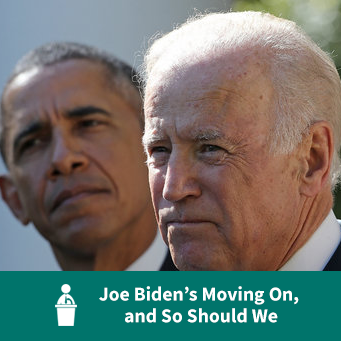
<style>
.page{position:relative;width:341px;height:341px}
.page>*{position:absolute;margin:0}
.t1{font:19.6px/21.6px "SourceSansPro-Bold";color:#ffffff}
</style>
<div class="page">
<p class="t1" style="left:99px;top:286px;width:200px;height:37px;text-align:center">Joe Biden’s Moving On, <br>and So Should We</p>
</div>
